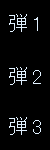
<style>
.page{position:relative;width:50px;height:150px;background:#000000}
.page>*{position:absolute;margin:0}
.t1{font:21.2px "MS-PGothic";color:#e1f1ff}
</style>
<div class="page">
<p class="t1" style="left:9px;top:14px;width:29px;height:18px">弾1</p>
<p class="t1" style="left:9px;top:67px;width:32px;height:18px">弾2</p>
<p class="t1" style="left:9px;top:117px;width:32px;height:18px">弾3</p>
</div>
